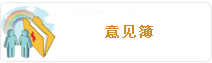
<style>
.page{position:relative;width:212px;height:63px;background:#ffffff}
.page>*{position:absolute;margin:0}
.t1{font:14px "SimSun";letter-spacing:0.15em;color:#d08b2c;font-weight:bold}
</style>
<div class="page">
<p class="t1" style="left:105px;top:25px;width:48px;height:13px">意见簿</p>
</div>
